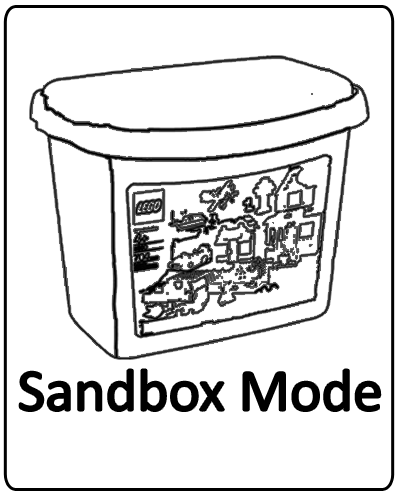
<style>
.page{position:relative;width:400px;height:500px;background:#ffffff}
.page>*{position:absolute;margin:0}
.t1{font:60px "Calibri";color:#000000}
</style>
<div class="page">
<p class="t1" style="left:19px;top:369px;width:362px;height:42px">Sandbox Mode</p>
</div>
